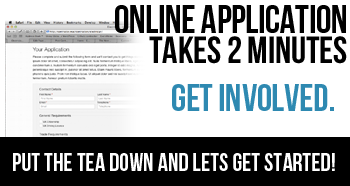
<style>
.page{position:relative;width:350px;height:186px;background:#ffffff}
.page>*{position:absolute;margin:0}
.t1{font:39px "BebasNeue";letter-spacing:-0.01em;color:#000000}
.t2{font:38px "BebasNeue";letter-spacing:-0.005em;color:#000000}
.t3{font:38px "BebasNeue";letter-spacing:-0.005em;color:#2e89b1}
.t4{font:25px "BebasNeue";color:#ffffff}
</style>
<div class="page">
<p class="t1" style="left:115px;top:5px;width:231px;height:28px">Online Application</p>
<p class="t2" style="left:149px;top:36px;width:198px;height:28px">Takes 2 minutes</p>
<p class="t3" style="left:172px;top:84px;width:162px;height:27px">Get Involved.</p>
<p class="t4" style="left:13px;top:153px;width:322px;height:18px">Put the tea down and lets get started!</p>
</div>
